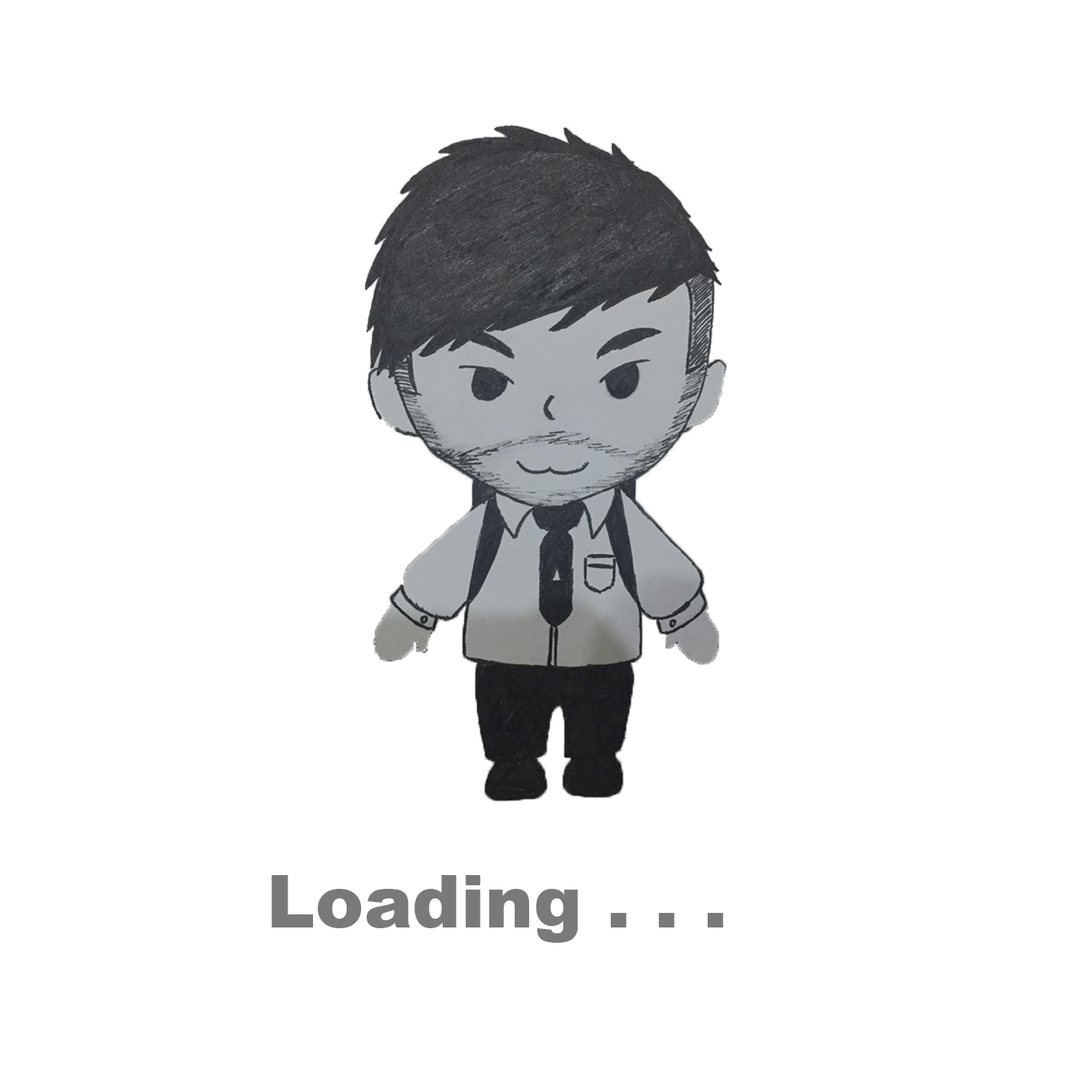
<style>
.page{position:relative;width:1092px;height:1092px;background:#ffffff}
.page>*{position:absolute;margin:0}
.t1{font:72.7px "Arial-Black";color:#797979}
</style>
<div class="page">
<p class="t1" style="left:272px;top:875px;width:452px;height:68px">Loading . . .</p>
</div>
